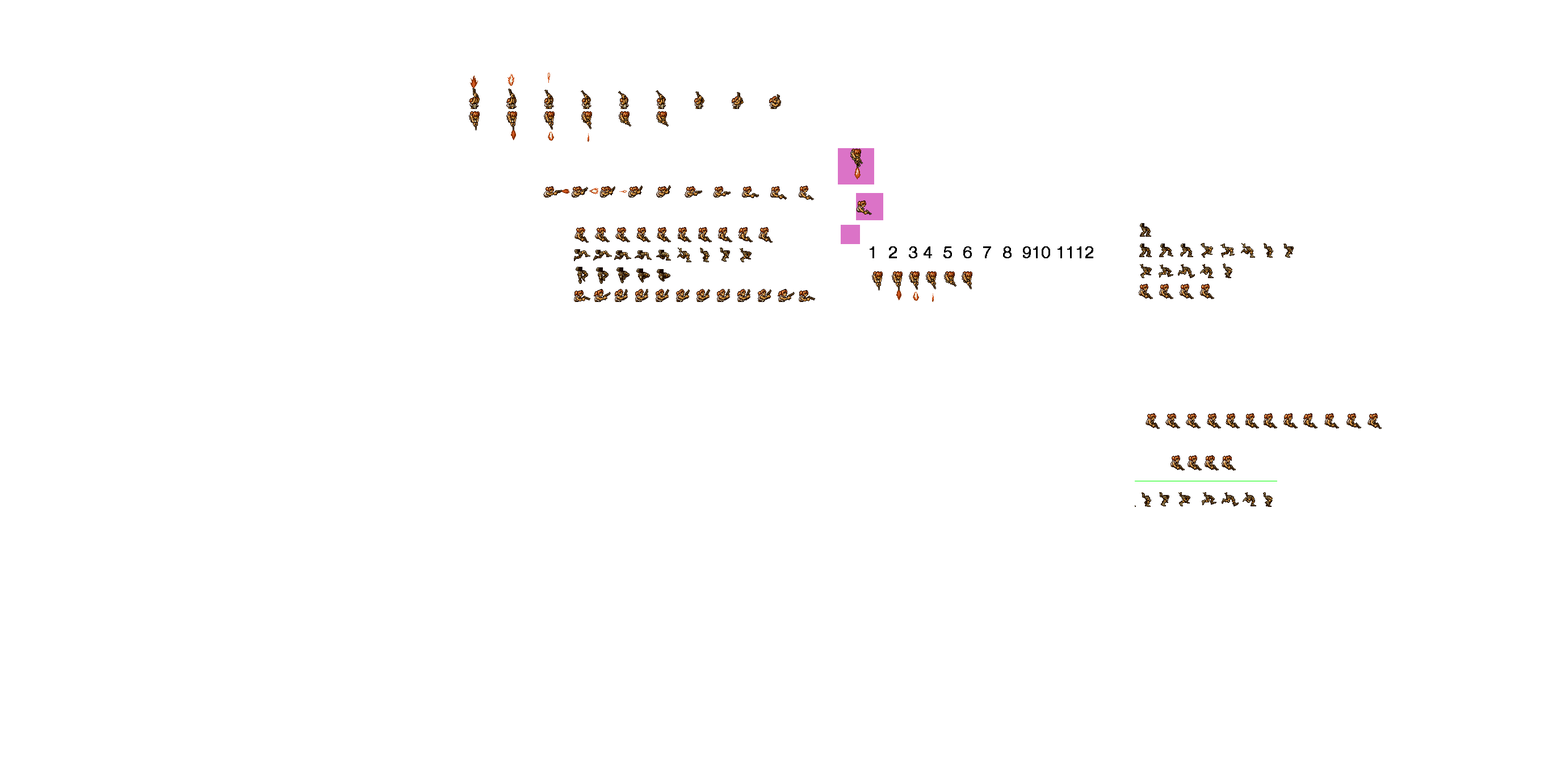
<style>
.page{position:relative;width:1544px;height:772px;background:#ffffff}
.page>*{position:absolute;margin:0}
.t1{font:15.9px "HelveticaNeue-Light";color:#000000;font-weight:bold}
</style>
<div class="page">
<p class="t1" style="left:870px;top:246px;width:224px;height:12px">1 2  3 4  5  6  7  8  910 1112</p>
</div>
